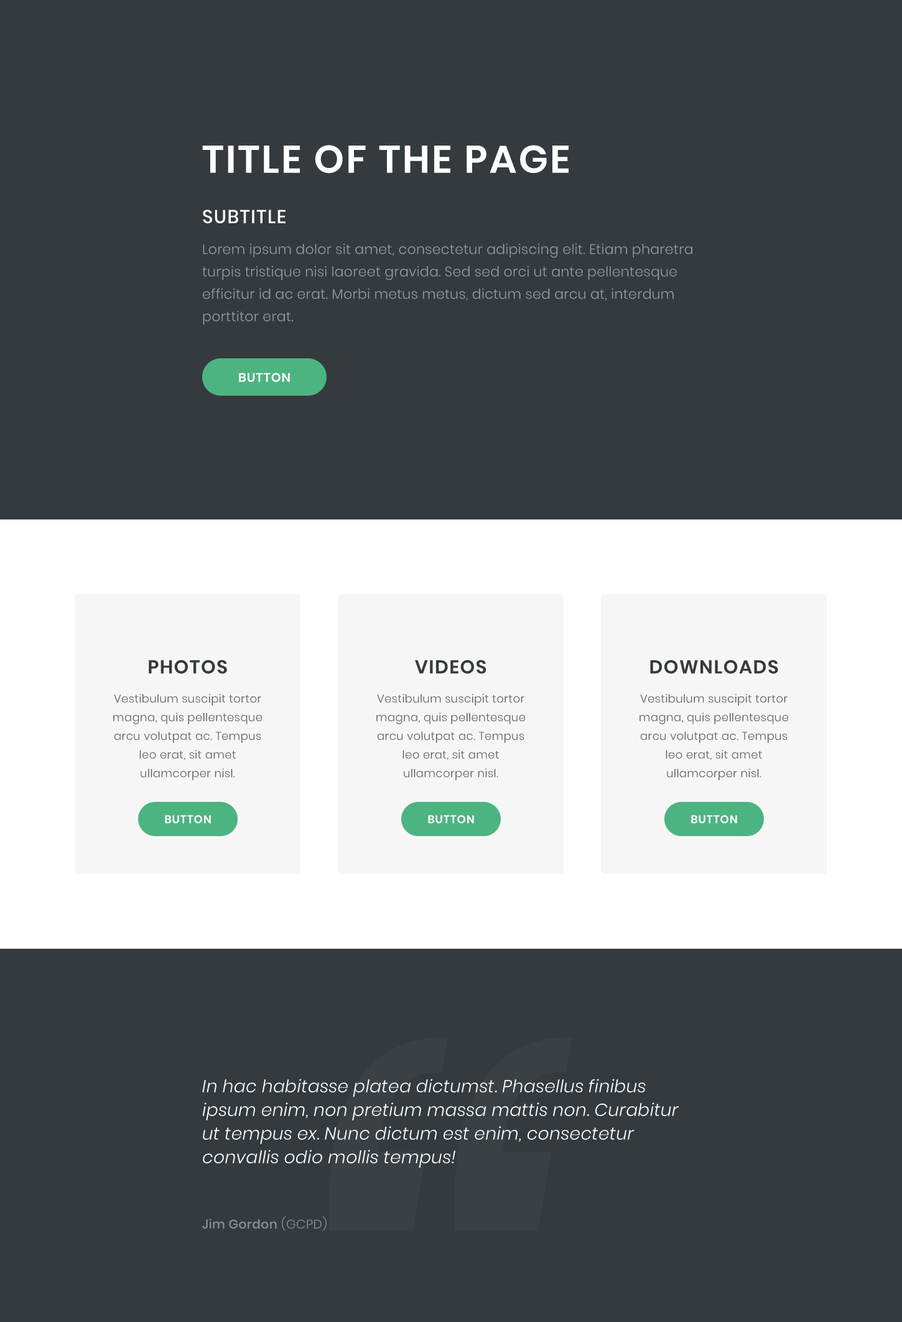
<style>
.page{position:relative;width:902px;height:1322px;background:#353a3f}
.page>*{position:absolute;margin:0}
.t1{font:38.6px "Poppins-SemiBold";letter-spacing:0.05em;color:#ffffff;text-transform:uppercase}
.t2{font:18.7px "Poppins-Medium";letter-spacing:0.05em;color:#ffffff;text-transform:uppercase}
.t3{font:13.7px/22.4px "Poppins-Light";letter-spacing:0.015em;color:#9a9d9f}
.t4{font:12.4px "Poppins-SemiBold";letter-spacing:0.05em;color:#ffffff;text-transform:uppercase}
.t5{font:18.7px "Poppins-SemiBold";letter-spacing:0.05em;color:#353a3f;text-transform:uppercase}
.t6{font:11.2px/18.7px "Poppins-Light";letter-spacing:0.025em;color:#5a5f65}
.t7{font:11.2px "Poppins-SemiBold";letter-spacing:0.05em;color:#ffffff;text-transform:uppercase}
.t8{font:17.4px/23.7px "Poppins-LightItalic";letter-spacing:0.015em;color:#ffffff}
.t9{font:12.4px "Poppins-Medium";letter-spacing:0.025em;color:#8c9198}
.t10{font:12.4px "Poppins-Light";letter-spacing:0.025em;color:#8c9198}
</style>
<div class="page">
<p class="t1" style="left:202px;top:145px;width:367px;height:29px">Title Of The Page</p>
<p class="t2" style="left:203px;top:210px;width:83px;height:13px">Subtitle</p>
<p class="t3" style="left:202px;top:243px;width:490px;height:82px">Lorem ipsum dolor sit amet, consectetur adipiscing elit. Etiam pharetra turpis tristique nisi laoreet gravida. Sed sed orci ut ante pellentesque efficitur id ac erat. Morbi metus metus, dictum sed arcu at, interdum porttitor erat.</p>
<p class="t4" style="left:239px;top:373px;width:51px;height:9px">Button</p>
<p class="t5" style="left:149px;top:660px;width:78px;height:14px">Photos</p>
<p class="t5" style="left:415px;top:660px;width:71px;height:14px">Videos</p>
<p class="t5" style="left:650px;top:660px;width:128px;height:14px">Downloads</p>
<p class="t6" style="left:113px;top:694px;width:149px;height:86px;text-align:center">Vestibulum suscipit tortor magna, quis pellentesque arcu volutpat ac. Tempus leo erat, sit amet ullamcorper nisl.</p>
<p class="t6" style="left:376px;top:694px;width:149px;height:86px;text-align:center">Vestibulum suscipit tortor magna, quis pellentesque arcu volutpat ac. Tempus leo erat, sit amet ullamcorper nisl.</p>
<p class="t6" style="left:640px;top:694px;width:148px;height:86px;text-align:center">Vestibulum suscipit tortor magna, quis pellentesque arcu volutpat ac. Tempus leo erat, sit amet ullamcorper nisl.</p>
<p class="t7" style="left:165px;top:815px;width:46px;height:9px">Button</p>
<p class="t7" style="left:428px;top:815px;width:46px;height:9px">Button</p>
<p class="t7" style="left:691px;top:815px;width:46px;height:9px">Button</p>
<p class="t8" style="left:202px;top:1079px;width:477px;height:89px">In hac habitasse platea dictumst. Phasellus finibus ipsum enim, non pretium massa mattis non. Curabitur ut tempus ex. Nunc dictum est enim, consectetur convallis odio mollis tempus!</p>
<p class="t9" style="left:202px;top:1216px;width:125px;height:15px">Jim Gordon<span class="t10"> (GCPD)</span></p>
</div>
